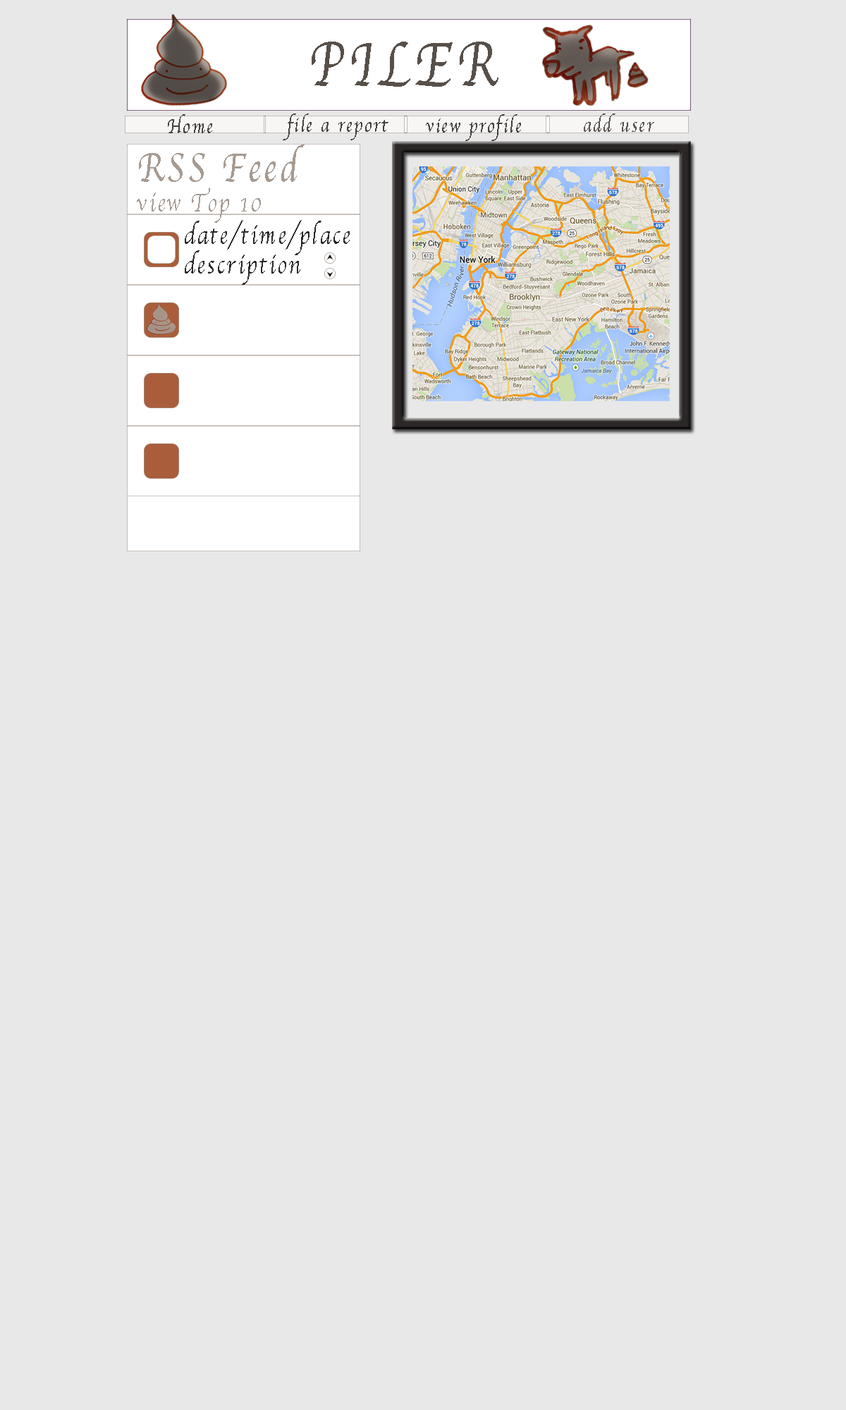
<style>
.page{position:relative;width:846px;height:1410px;background:#e8e8e8}
.page>*{position:absolute;margin:0}
.t1{font:63.9px "Apple-Chancery";letter-spacing:0.1em;color:#57504a;scale:0.79 1}
.t2{font:21.3px "Apple-Chancery";letter-spacing:0.1em;color:#46413c;scale:0.79 1}
.t3{font:21.3px "Apple-Chancery";letter-spacing:0.1em;color:#57504a;scale:0.79 1}
.t4{font:26.6px/14.9px "Apple-Chancery";letter-spacing:0.1em;color:#a69a91;scale:0.79 1}
.t5{font:42.6px/14.9px "Apple-Chancery";letter-spacing:0.1em;color:#a69a91;scale:0.79 1}
.t6{font:26.6px/14.9px "Apple-Chancery";letter-spacing:0.1em;color:#2a2726;scale:0.79 1}
</style>
<div class="page">
<p class="t1" style="left:312px;top:42px;width:186px;height:45px">PILER</p>
<p class="t2" style="left:283px;top:113px;width:105px;height:27px">file a report</p>
<p class="t3" style="left:584px;top:113px;width:70px;height:19px">add user</p>
<p class="t2" style="left:168px;top:114px;width:44px;height:19px">Home</p>
<p class="t2" style="left:426px;top:114px;width:95px;height:27px">view profile</p>
<p class="t4" style="left:137px;top:144px;width:168px;height:79px"><span class="t5">RSS Feed<br></span><br>view Top 10</p>
<p class="t6" style="left:185px;top:220px;width:165px;height:65px">date/time/place<br><br>description</p>
</div>
